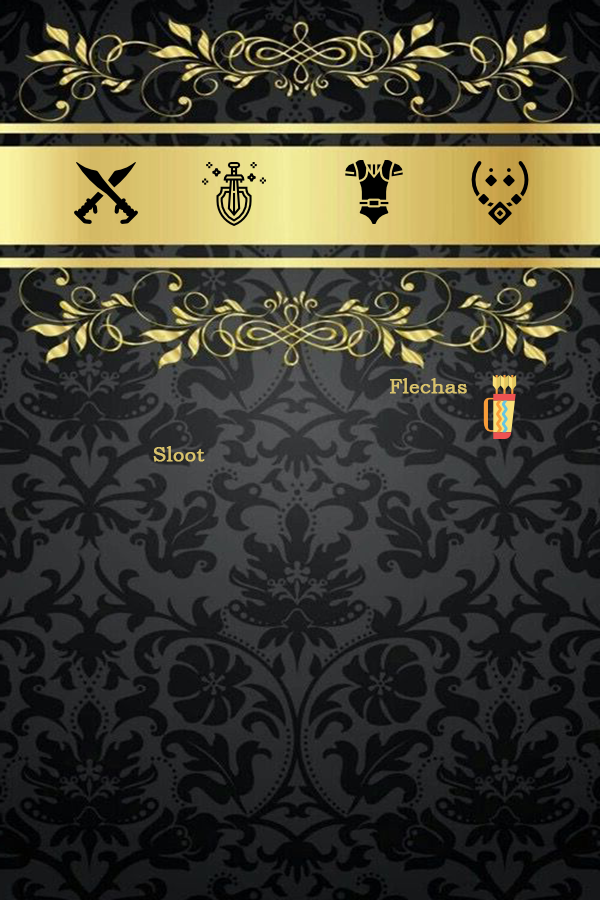
<style>
.page{position:relative;width:600px;height:900px}
.page>*{position:absolute;margin:0}
.t1{font:20px "BookmanOldStyle";color:#d8c26c;font-weight:bold}
</style>
<div class="page">
<p class="t1" style="left:390px;top:378px;width:77px;height:16px">Flechas</p>
<p class="t1" style="left:153px;top:446px;width:52px;height:16px">Sloot</p>
</div>
